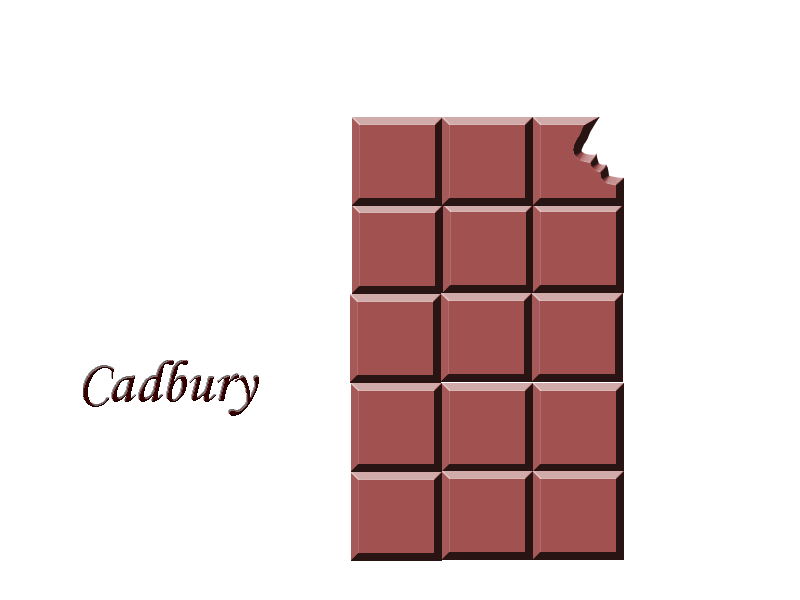
<style>
.page{position:relative;width:800px;height:600px;background:#ffffff}
.page>*{position:absolute;margin:0}
.t1{font:60px "MonotypeCorsiva";color:#360000}
</style>
<div class="page">
<p class="t1" style="left:83px;top:360px;width:176px;height:56px">Cadbury</p>
</div>
